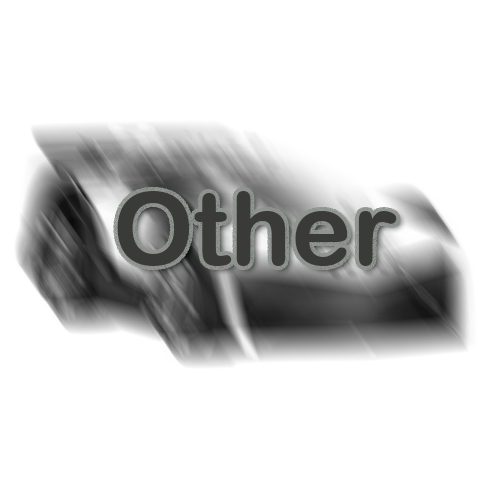
<style>
.page{position:relative;width:488px;height:488px;background:#ffffff}
.page>*{position:absolute;margin:0}
.t1{font:102px "ArialRoundedMTBold";color:#3a3b38}
</style>
<div class="page">
<p class="t1" style="left:117px;top:191px;width:280px;height:75px">Other</p>
</div>
